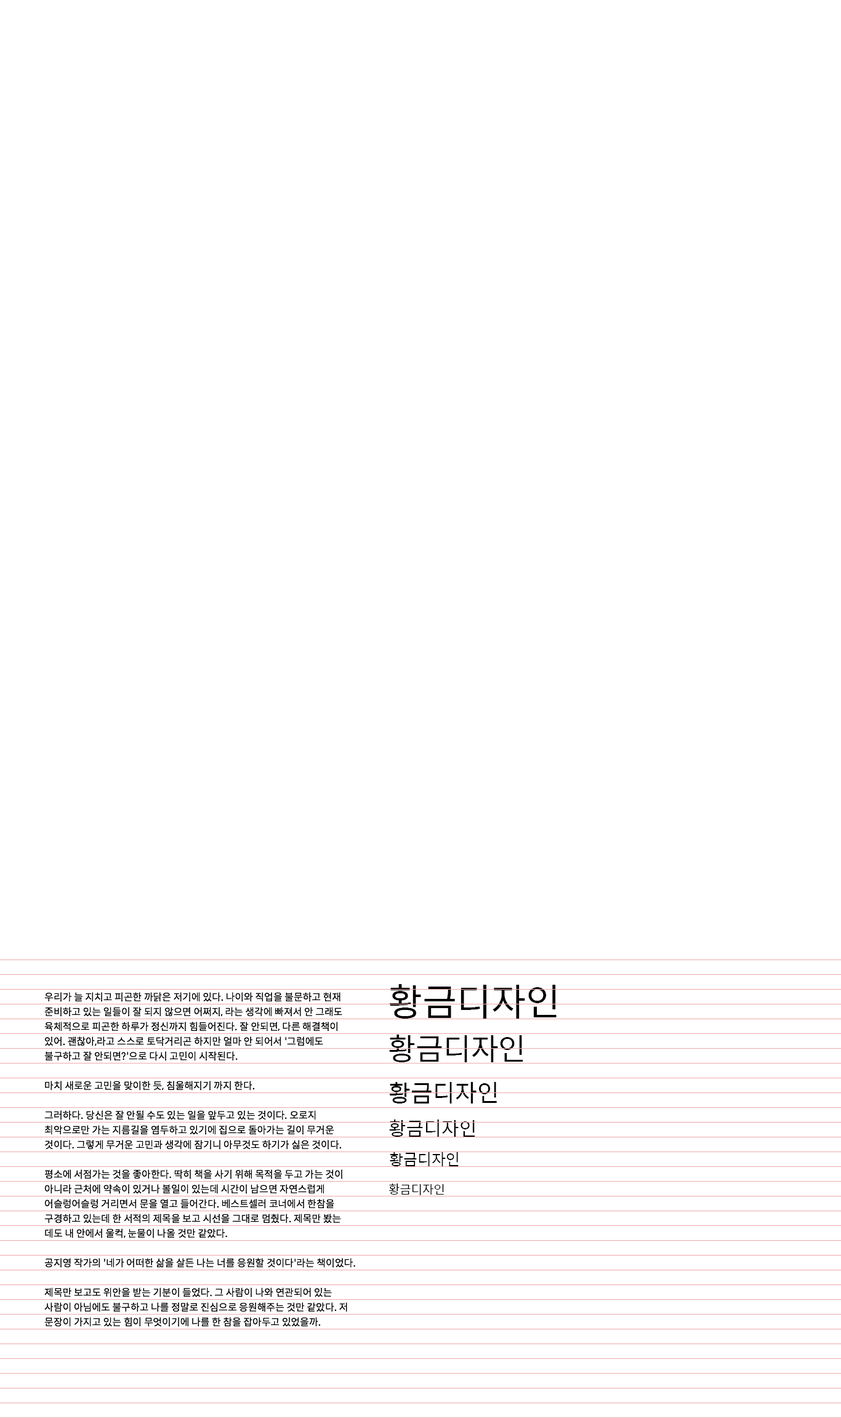
<style>
.page{position:relative;width:841px;height:1418px;background:#ffffff}
.page>*{position:absolute;margin:0}
.t1{font:37.6px "SpoqaHanSans-Regular";color:#000000;text-transform:uppercase}
.t2{font:9.8px "SpoqaHanSans-Regular";color:#000000;text-transform:uppercase}
.t3{font:30.1px "SpoqaHanSans-Regular";color:#000000;text-transform:uppercase}
.t4{font:24px "SpoqaHanSans-Regular";color:#000000;text-transform:uppercase}
.t5{font:19.2px "SpoqaHanSans-Regular";color:#000000;text-transform:uppercase}
.t6{font:15.4px "SpoqaHanSans-Regular";color:#000000;text-transform:uppercase}
.t7{font:12.3px "SpoqaHanSans-Regular";color:#000000;text-transform:uppercase}
</style>
<div class="page">
<p class="t1" style="left:390px;top:984px;width:166px;height:35px">황금디자인</p>
<p class="t2" style="left:44px;top:992px;width:311px;height:335px">우리가 늘 지치고 피곤한 까닭은 저기에 있다. 나이와 직업을 불문하고 현재 준비하고 있는 일들이 잘 되지 않으면 어쩌지, 라는 생각에 빠져서 안 그래도 육체적으로 피곤한 하루가 정신까지 힘들어진다. 잘 안되면, 다른 해결책이 있어. 괜찮아,라고 스스로 토닥거리곤 하지만 얼마 안 되어서 '그럼에도 불구하고 잘 안되면?'으로 다시 고민이 시작된다.<br>마치 새로운 고민을 맞이한 듯, 침울해지기 까지 한다.<br>그러하다. 당신은 잘 안될 수도 있는 일을 앞두고 있는 것이다. 오로지 최악으로만 가는 지름길을 염두하고 있기에 집으로 돌아가는 길이 무거운 것이다. 그렇게 무거운 고민과 생각에 잠기니 아무것도 하기가 싫은 것이다.<br>평소에 서점가는 것을 좋아한다. 딱히 책을 사기 위해 목적을 두고 가는 것이 아니라 근처에 약속이 있거나 볼일이 있는데 시간이 남으면 자연스럽게 어슬렁어슬렁 거리면서 문을 열고 들어간다. 베스트셀러 코너에서 한참을 구경하고 있는데 한 서적의 제목을 보고 시선을 그대로 멈췄다. 제목만 봤는 데도 내 안에서 울컥, 눈물이 나올 것만 같았다.<br>공지영 작가의 '네가 어떠한 삶을 살든 나는 너를 응원할 것이다'라는 책이었다.<br>제목만 보고도 위안을 받는 기분이 들었다. 그 사람이 나와 연관되어 있는 사람이 아님에도 불구하고 나를 정말로 진심으로 응원해주는 것만 같았다. 저 문장이 가지고 있는 힘이 무엇이기에 나를 한 참을 잡아두고 있었을까.</p>
<p class="t3" style="left:389px;top:1035px;width:134px;height:27px">황금디자인</p>
<p class="t4" style="left:389px;top:1082px;width:108px;height:22px">황금디자인</p>
<p class="t5" style="left:389px;top:1120px;width:86px;height:17px">황금디자인</p>
<p class="t6" style="left:390px;top:1152px;width:69px;height:14px">황금디자인</p>
<p class="t7" style="left:389px;top:1184px;width:55px;height:11px">황금디자인</p>
</div>
